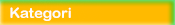
<style>
.page{position:relative;width:175px;height:25px;background:#ffba00}
.page>*{position:absolute;margin:0}
.t1{font:14.2px "ArialRoundedMTBold";color:#fdfcfc;scale:1.07 1}
</style>
<div class="page">
<p class="t1" style="left:10px;top:7px;width:61px;height:14px">Kategori</p>
</div>
